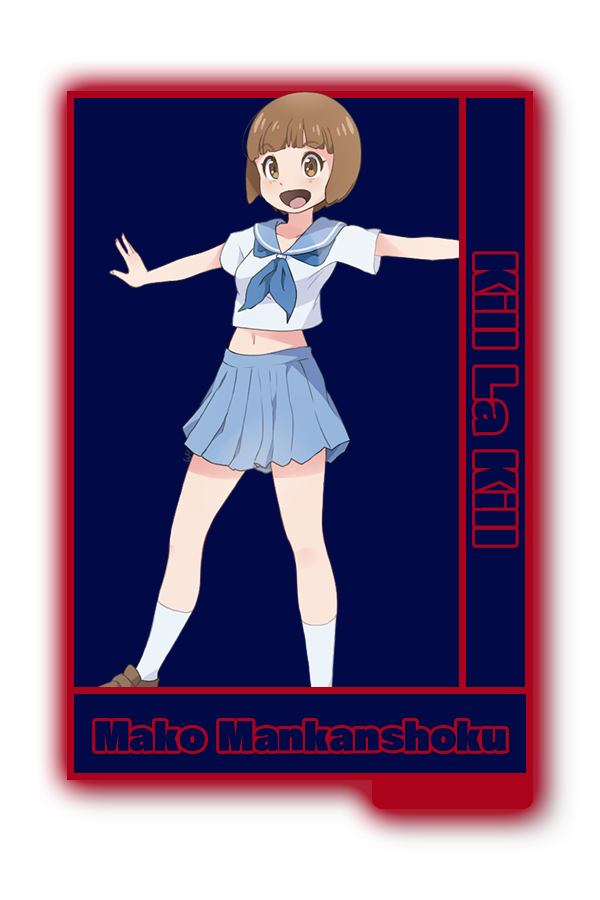
<style>
.page{position:relative;width:600px;height:900px;background:#010947}
.page>*{position:absolute;margin:0}
.t1{font:48.8px "RaglanPunchStd-UB";color:#010947}
.t2{font:35.7px "RaglanPunchStd-UB";color:#010947}
</style>
<div class="page">
<p class="t1" style="left:474px;top:254px;width:42px;height:291px;rotate:90deg">Kill La Kill</p>
<p class="t2" style="left:95px;top:721px;width:412px;height:30px">Mako Mankanshoku</p>
</div>
